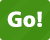
<style>
.page{position:relative;width:50px;height:40px;background:#449116}
.page>*{position:absolute;margin:0}
.t1{font:22px "MyriadPro-Bold";color:#ffffff;font-weight:bold}
</style>
<div class="page">
<p class="t1" style="left:7px;top:11px;width:35px;height:16px">Go!</p>
</div>
